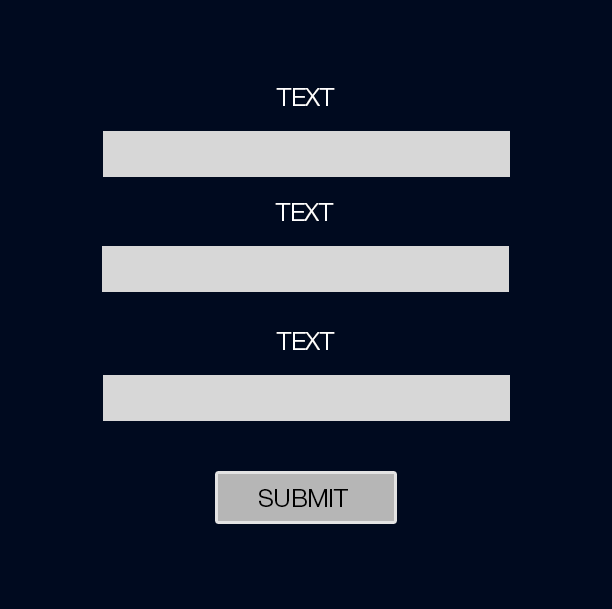
<style>
.page{position:relative;width:612px;height:609px;background:#000a1f}
.page>*{position:absolute;margin:0}
.t1{font:25px "HelveticaNeueLTStd-Lt";color:#ffffff;text-transform:uppercase}
.t2{font:25px "HelveticaNeueLTStd-Lt";color:#000000;text-transform:uppercase}
</style>
<div class="page">
<p class="t1" style="left:276px;top:88px;width:59px;height:18px">text</p>
<p class="t1" style="left:275px;top:203px;width:59px;height:18px">text</p>
<p class="t1" style="left:276px;top:332px;width:59px;height:18px">text</p>
<p class="t2" style="left:259px;top:489px;width:89px;height:18px">submit</p>
</div>
